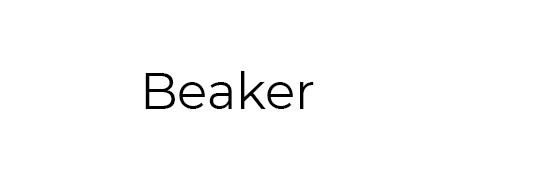
<style>
.page{position:relative;width:533px;height:180px;background:#ffffff}
.page>*{position:absolute;margin:0}
.t1{font:50px "Montserrat-Regular";color:#000000}
</style>
<div class="page">
<p class="t1" style="left:145px;top:71px;width:169px;height:38px">Beaker</p>
</div>
